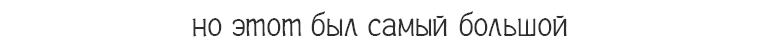
<style>
.page{position:relative;width:759px;height:49px;background:#ffffff}
.page>*{position:absolute;margin:0}
.t1{font:35px "Plainot";color:#2e2e2e}
</style>
<div class="page">
<p class="t1" style="left:192px;top:11px;width:375px;height:26px">но этот был самый большой</p>
</div>
